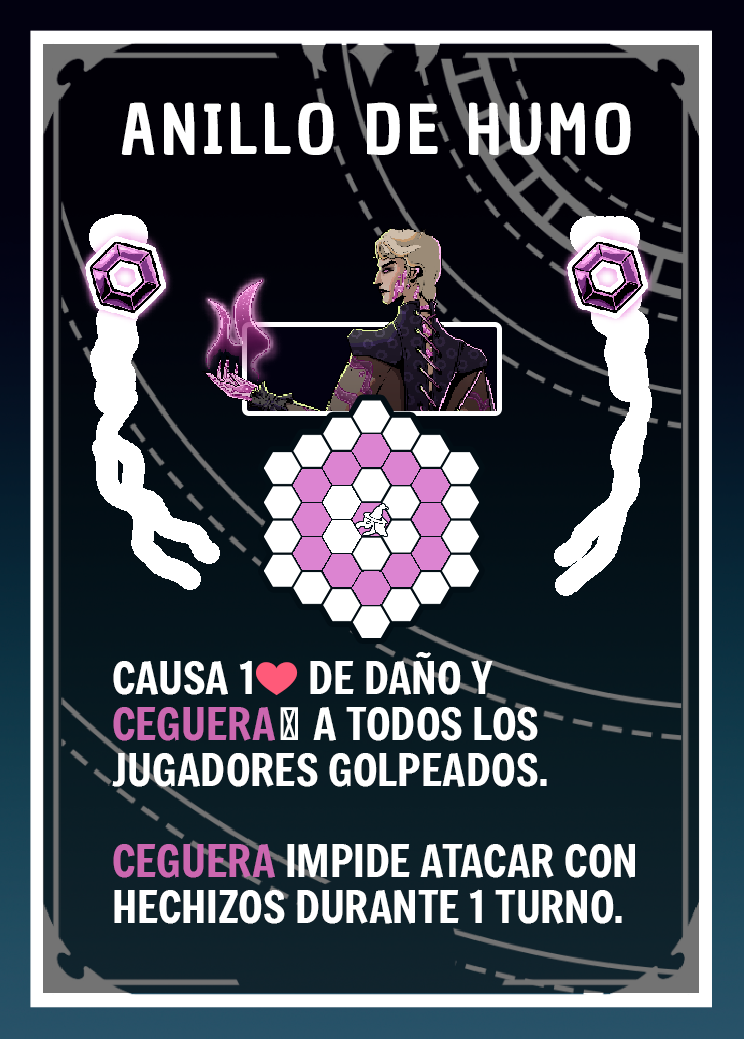
<style>
.page{position:relative;width:744px;height:1039px}
.page>*{position:absolute;margin:0}
.t1{font:66.7px "ChauPhilomeneOne-Regular";letter-spacing:0.075em;color:#ffffff}
.t2{font:43.7px/45.8px "Freeman-Regular";color:#ffffff}
.t3{font:43.7px/45.8px "EmojiOneColor";color:#ffffff}
.t4{font:43.7px/45.8px "Freeman-Regular";color:#cb67b0}
</style>
<div class="page">
<p class="t1" style="left:121px;top:102px;width:510px;height:53px">ANILLO DE HUMO</p>
<p class="t2" style="left:112px;top:652px;width:523px;height:272px">CAUSA 1<span class="t3">❤️</span> DE DAÑO Y <span class="t4">CEGUERA</span>🌀 A TODOS LOS JUGADORES GOLPEADOS.<br><br><span class="t4">CEGUERA </span>IMPIDE ATACAR CON HECHIZOS DURANTE 1 TURNO.</p>
</div>
